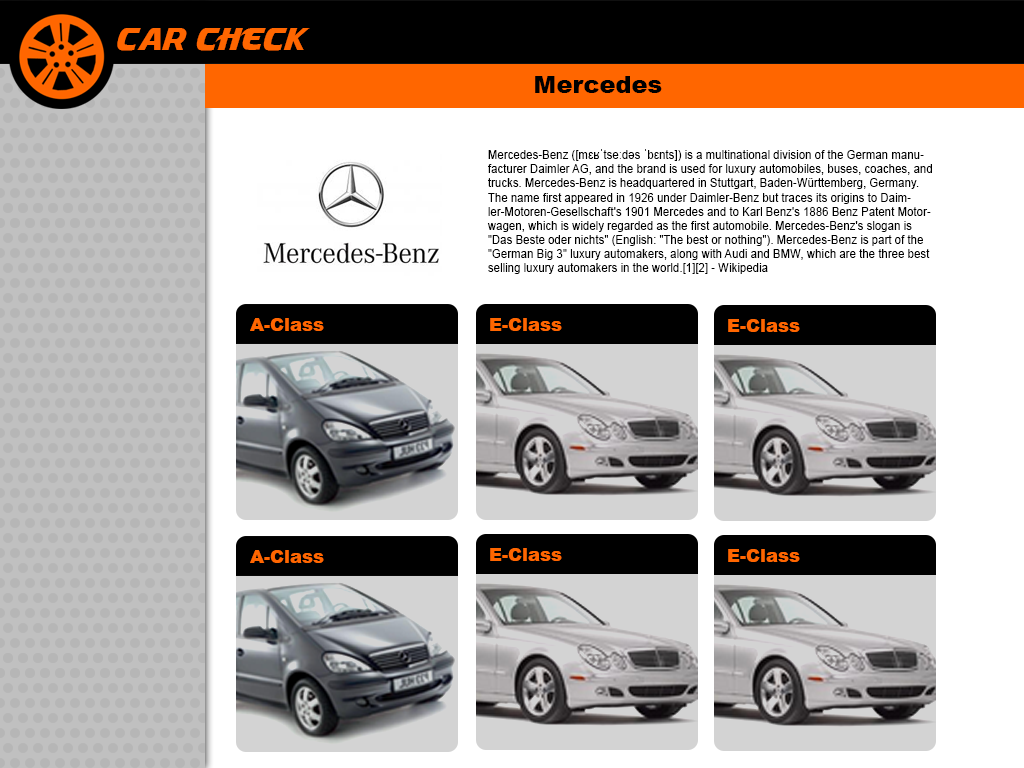
<style>
.page{position:relative;width:1024px;height:768px;background:#ffffff}
.page>*{position:absolute;margin:0}
.t1{font:30px "Masque";color:#ff6600}
.t2{font:24px "Arial-Black";color:#000000}
.t3{font:11.8px "ArialMT";color:#000000}
.t4{font:18px "Arial-Black";color:#ff6600}
</style>
<div class="page">
<p class="t1" style="left:117px;top:28px;width:193px;height:23px">Car Check</p>
<p class="t2" style="left:535px;top:76px;width:127px;height:17px">Mercedes</p>
<p class="t3" style="left:487px;top:149px;width:445px;height:125px">Mercedes-Benz ([mɛʁˈtseːdəs ˈbɛnts]) is a multinational division of the German manufacturer Daimler AG, and the brand is used for luxury automobiles, buses, coaches, and trucks. Mercedes-Benz is headquartered in Stuttgart, Baden-Württemberg, Germany. The name first appeared in 1926 under Daimler-Benz but traces its origins to Daimler-Motoren-Gesellschaft's 1901 Mercedes and to Karl Benz's 1886 Benz Patent Motorwagen, which is widely regarded as the first automobile. Mercedes-Benz's slogan is "Das Beste oder nichts" (English: "The best or nothing"). Mercedes-Benz is part of the "German Big 3" luxury automakers, along with Audi and BMW, which are the three best selling luxury automakers in the world.[1][2] - Wikipedia</p>
<p class="t4" style="left:250px;top:318px;width:74px;height:13px">A-Class</p>
<p class="t4" style="left:490px;top:318px;width:72px;height:13px">E-Class</p>
<p class="t4" style="left:728px;top:319px;width:72px;height:13px">E-Class</p>
<p class="t4" style="left:250px;top:550px;width:74px;height:13px">A-Class</p>
<p class="t4" style="left:490px;top:548px;width:72px;height:13px">E-Class</p>
<p class="t4" style="left:728px;top:549px;width:72px;height:13px">E-Class</p>
</div>
